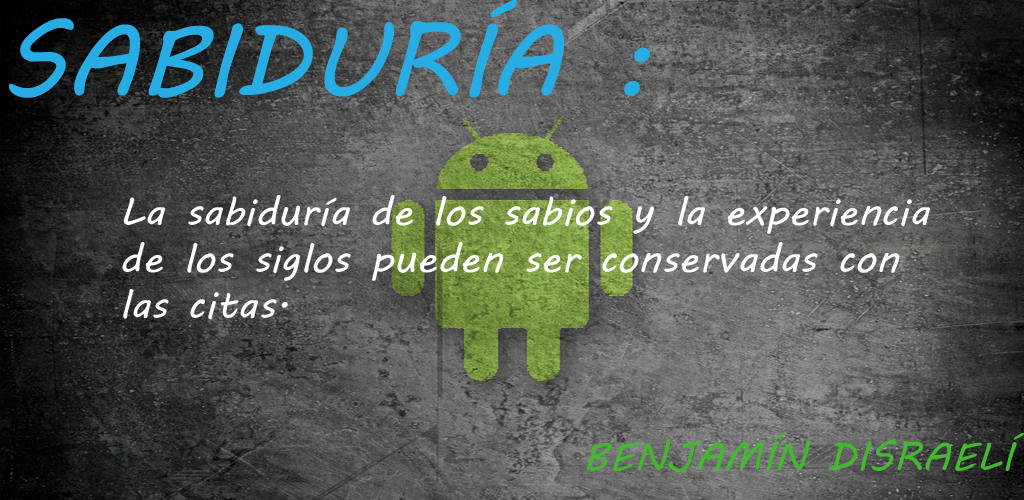
<style>
.page{position:relative;width:1024px;height:500px}
.page>*{position:absolute;margin:0}
.t1{font:100px "MVBoli";color:#27ade4;scale:1.07 1}
.t2{font:38.9px "MVBoli";color:#ffffff;scale:1.07 1}
.t3{font:38.9px "MVBoli";color:#44b82e;scale:1.07 1}
</style>
<div class="page">
<p class="t1" style="left:9px;top:0px;width:641px;height:98px">SABIDURÍA :</p>
<p class="t2" style="left:122px;top:195px;width:808px;height:125px">La sabiduría de los sabios y la experiencia<br>de los siglos pueden ser conservadas con <br>las citas.</p>
<p class="t3" style="left:586px;top:432px;width:438px;height:40px">BENJAMÍN DISRAELÍ</p>
</div>
